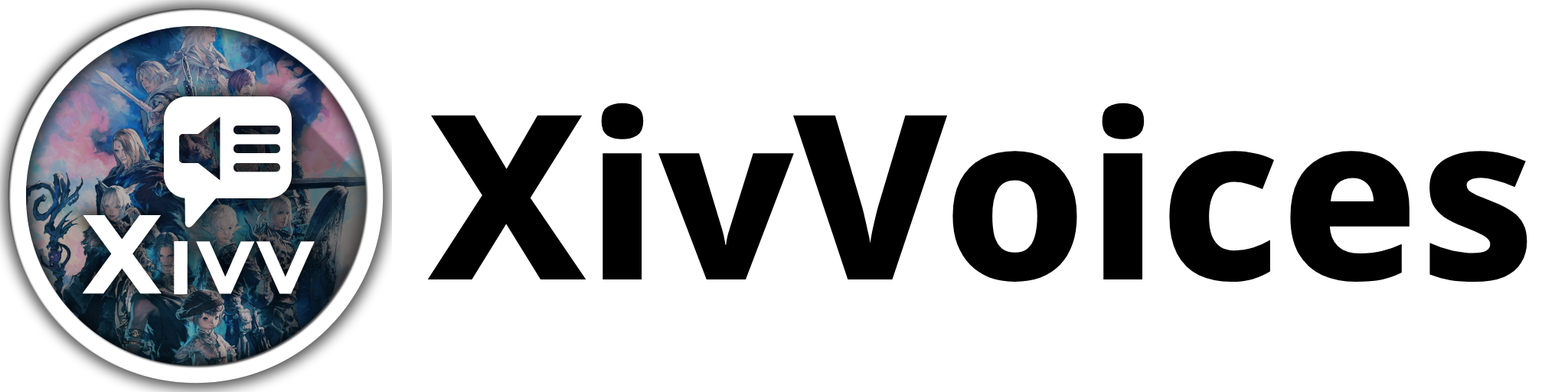
<style>
.page{position:relative;width:1568px;height:392px;background:#ffffff}
.page>*{position:absolute;margin:0}
.t1{font:229.7px "NotoSans-ExtraBold";color:#000000}
</style>
<div class="page">
<p class="t1" style="left:427px;top:103px;width:1100px;height:179px">XivVoices</p>
</div>
